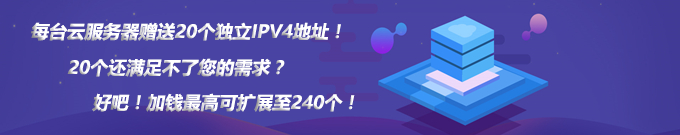
<style>
.page{position:relative;width:680px;height:135px}
.page>*{position:absolute;margin:0}
.t1{font:18px "MicrosoftYaHei-Bold";color:#ffffff;font-style:italic}
</style>
<div class="page">
<p class="t1" style="left:31px;top:22px;width:310px;height:19px">每台云服务器赠送20个独立IPV4地址！</p>
<p class="t1" style="left:67px;top:58px;width:218px;height:19px">20个还满足不了您的需求？</p>
<p class="t1" style="left:92px;top:93px;width:263px;height:19px">好吧！加钱最高可扩展至240个！</p>
</div>
